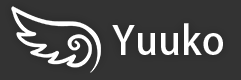
<style>
.page{position:relative;width:241px;height:80px;background:#333333}
.page>*{position:absolute;margin:0}
.t1{font:38.6px "AdobeHeitiStd-Regular";color:#ffffff}
</style>
<div class="page">
<p class="t1" style="left:112px;top:23px;width:111px;height:32px">Yuuko</p>
</div>
